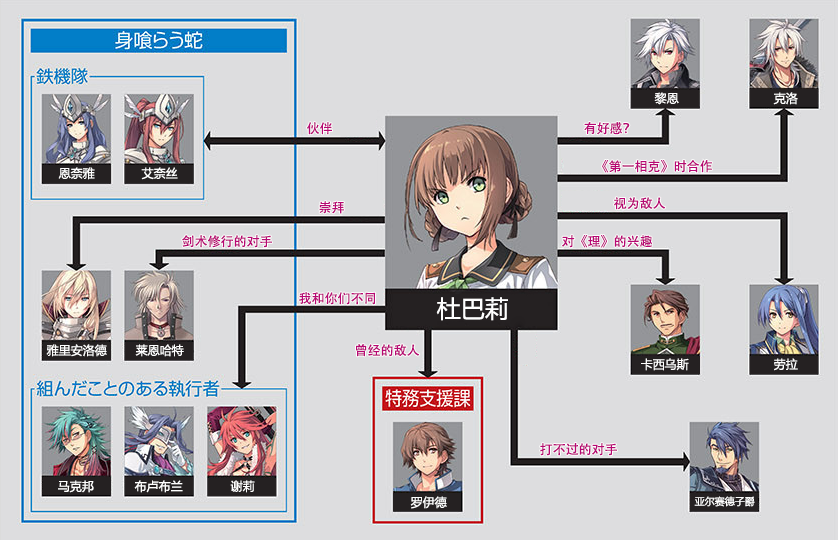
<style>
.page{position:relative;width:838px;height:540px;background:#dddddf}
.page>*{position:absolute;margin:0}
.t1{font:12px "MicrosoftYaHei";color:#ffffff}
.t2{font:13px "AdobeHeitiStd-Regular";color:#b70773}
.t3{font:24px "MicrosoftYaHei";color:#ffffff}
.t4{font:10px "MicrosoftYaHei";color:#ffffff}
</style>
<div class="page">
<p class="t1" style="left:654px;top:92px;width:25px;height:13px">黎恩</p>
<p class="t1" style="left:773px;top:92px;width:25px;height:13px">克洛</p>
<p class="t2" style="left:307px;top:122px;width:25px;height:13px">伙伴</p>
<p class="t2" style="left:584px;top:122px;width:46px;height:13px">有好感？</p>
<p class="t2" style="left:602px;top:160px;width:110px;height:13px">《第一相克》时合作</p>
<p class="t1" style="left:58px;top:167px;width:37px;height:13px">恩奈雅</p>
<p class="t1" style="left:141px;top:167px;width:37px;height:13px">艾奈丝</p>
<p class="t2" style="left:614px;top:197px;width:52px;height:13px">视为敌人</p>
<p class="t2" style="left:319px;top:201px;width:25px;height:13px">崇拜</p>
<p class="t2" style="left:182px;top:235px;width:90px;height:13px">剑术修行的对手</p>
<p class="t2" style="left:562px;top:235px;width:90px;height:13px">对《理》的兴趣</p>
<p class="t2" style="left:299px;top:292px;width:77px;height:13px">我和你们不同</p>
<p class="t3" style="left:436px;top:297px;width:72px;height:24px">杜巴莉</p>
<p class="t1" style="left:46px;top:344px;width:61px;height:13px">雅里安洛德</p>
<p class="t1" style="left:135px;top:344px;width:49px;height:13px">莱恩哈特</p>
<p class="t2" style="left:356px;top:344px;width:64px;height:13px">曾经的敌人</p>
<p class="t1" style="left:641px;top:358px;width:48px;height:13px">卡西乌斯</p>
<p class="t1" style="left:774px;top:358px;width:24px;height:13px">劳拉</p>
<p class="t2" style="left:540px;top:443px;width:77px;height:13px">打不过的对手</p>
<p class="t1" style="left:58px;top:480px;width:36px;height:13px">马克邦</p>
<p class="t1" style="left:134px;top:480px;width:49px;height:13px">布卢布兰</p>
<p class="t1" style="left:230px;top:480px;width:25px;height:13px">谢莉</p>
<p class="t1" style="left:410px;top:496px;width:37px;height:13px">罗伊德</p>
<p class="t4" style="left:694px;top:496px;width:61px;height:11px">亚尔赛德子爵</p>
</div>
